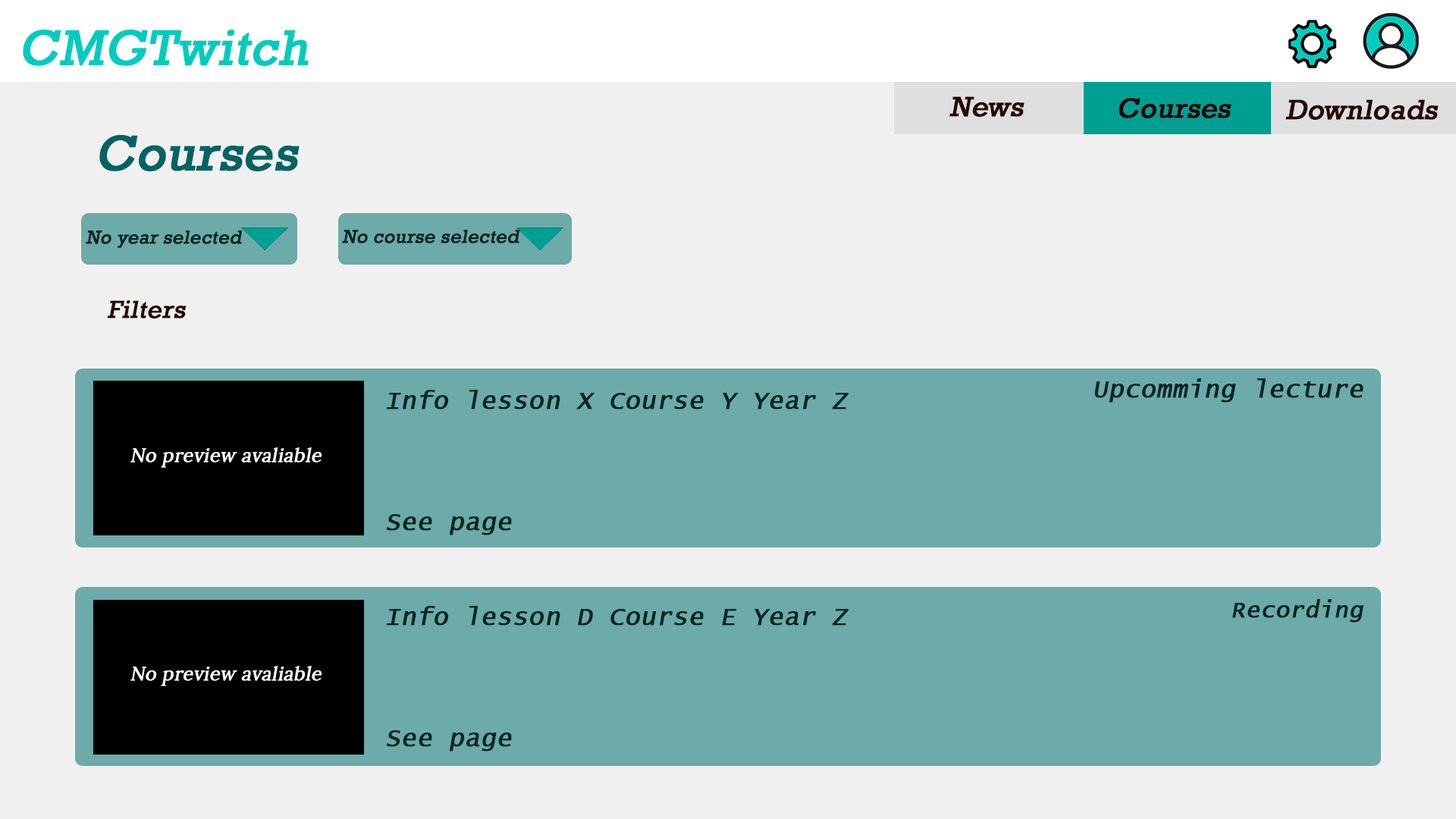
<style>
.page{position:relative;width:1456px;height:819px;background:#f0f0f0}
.page>*{position:absolute;margin:0}
.t1{font:50.6px "Rockwell";color:#00ccbe;font-weight:bold;font-style:italic}
.t2{font:28.4px "Rockwell";color:#250902;font-weight:bold;font-style:italic}
.t3{font:50.6px "Rockwell";color:#036363;font-weight:bold;font-style:italic}
.t4{font:19px "Rockwell";color:#022624;font-weight:bold;font-style:italic}
.t5{font:25.3px "Rockwell";color:#250902;font-weight:bold;font-style:italic}
.t6{font:25.3px "LucidaConsole";color:#022624;font-weight:bold;font-style:italic}
.t7{font:19px "Lora-Regular";color:#ffffff;font-weight:bold;font-style:italic}
.t8{font:23.3px "LucidaConsole";color:#022624;font-weight:bold;font-style:italic}
</style>
<div class="page">
<p class="t1" style="left:23px;top:30px;width:286px;height:36px">CMGTwitch</p>
<p class="t2" style="left:949px;top:96px;width:75px;height:21px">News</p>
<p class="t2" style="left:1119px;top:98px;width:113px;height:20px">Courses</p>
<p class="t2" style="left:1285px;top:99px;width:154px;height:21px">Downloads</p>
<p class="t3" style="left:99px;top:135px;width:201px;height:36px">Courses</p>
<p class="t4" style="left:86px;top:231px;width:157px;height:17px">No year selected</p>
<p class="t4" style="left:342px;top:230px;width:178px;height:13px">No course selected</p>
<p class="t5" style="left:107px;top:300px;width:80px;height:18px">Filters</p>
<p class="t6" style="left:386px;top:390px;width:463px;height:145px">Info lesson X Course Y Year Z<br><br><br><br>See page</p>
<p class="t6" style="left:1094px;top:378px;width:269px;height:25px">Upcomming lecture</p>
<p class="t7" style="left:130px;top:447px;width:192px;height:21px">No preview avaliable</p>
<p class="t6" style="left:386px;top:606px;width:463px;height:145px">Info lesson D Course E Year Z<br><br><br><br>See page</p>
<p class="t8" style="left:1232px;top:599px;width:131px;height:24px">Recording</p>
<p class="t7" style="left:130px;top:666px;width:192px;height:20px">No preview avaliable</p>
</div>
